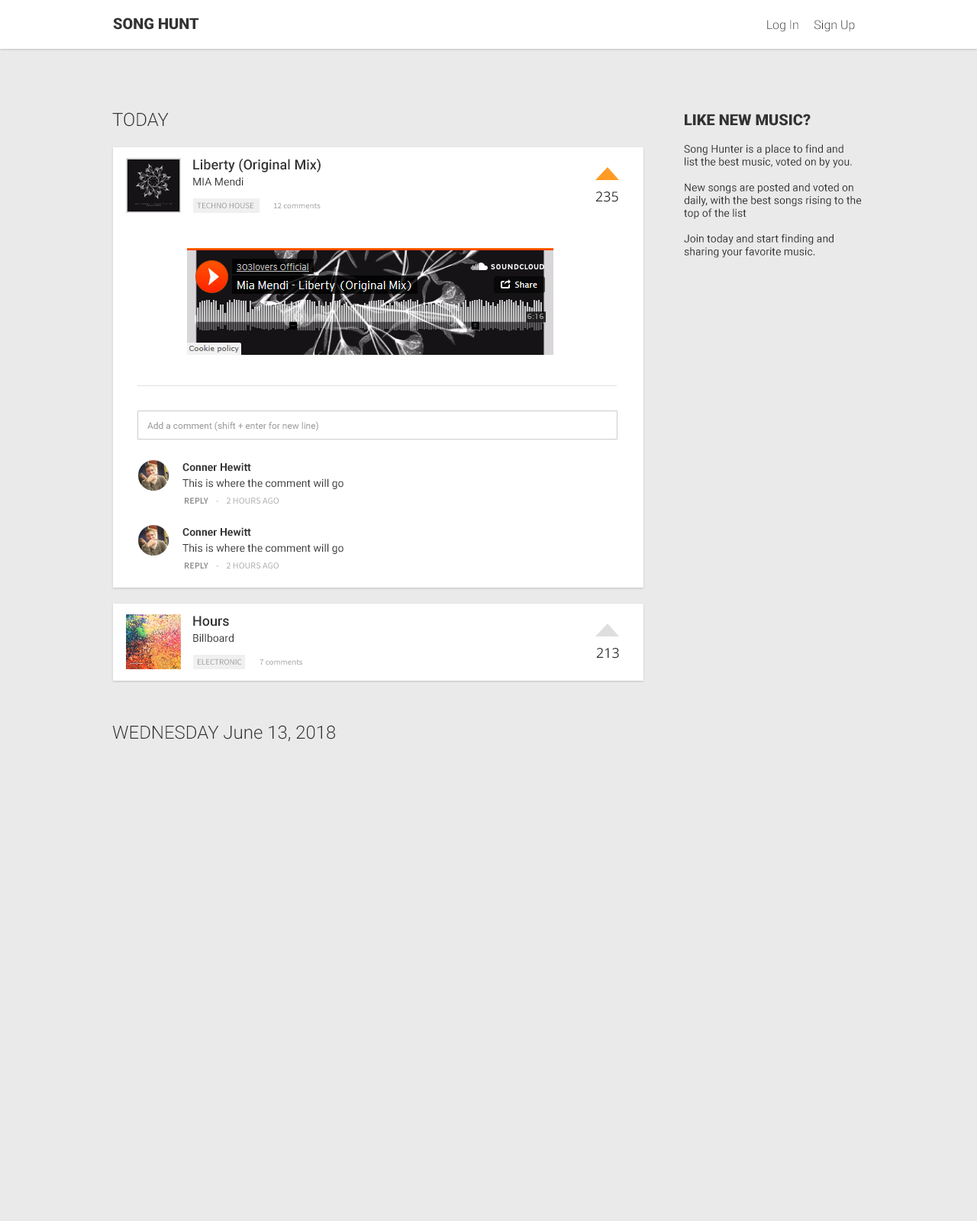
<style>
.page{position:relative;width:977px;height:1221px;background:#eaeaea}
.page>*{position:absolute;margin:0}
.t1{font:15.3px "Roboto-Black";color:#333333}
.t2{font:12.2px "Roboto-Light";color:#333333}
.t3{font:18.3px "Roboto-Light";color:#333333}
.t4{font:10.7px "Roboto-Regular";color:#333333}
.t5{font:13.7px "Roboto-Medium";color:#333333}
.t6{font:13.7px "OpenSans";color:#333333}
.t7{font:8.4px "SourceSansPro-Regular";color:#a0a0a0}
.t8{font:9.2px "Roboto-Regular";color:#979797}
.t9{font:10.7px "Roboto-Bold";color:#333333}
.t10{font:9.2px "SourceSansPro-Semibold";color:#909090}
.t11{font:9.2px "SourceSansPro-Regular";color:#ababab}
</style>
<div class="page">
<p class="t1" style="left:113px;top:18px;width:86px;height:12px">SONG HUNT</p>
<p class="t2" style="left:767px;top:20px;width:88px;height:12px">Log In     Sign Up</p>
<p class="t3" style="left:112px;top:112px;width:57px;height:15px">TODAY</p>
<p class="t1" style="left:684px;top:114px;width:126px;height:12px">LIKE NEW MUSIC?</p>
<p class="t4" style="left:684px;top:144px;width:177px;height:114px">Song Hunter is a place to find and<br>list the best music, voted on by you.<br><br>New songs are posted and voted on<br>daily, with the best songs rising to the<br>top of the list<br><br>Join today and start finding and<br>sharing your favorite music.</p>
<p class="t5" style="left:193px;top:158px;width:127px;height:14px">Liberty (Original Mix)</p>
<p class="t4" style="left:193px;top:177px;width:50px;height:9px">MIA Mendi</p>
<p class="t6" style="left:595px;top:192px;width:23px;height:10px">235</p>
<p class="t7" style="left:197px;top:202px;width:57px;height:6px">TECHNO HOUSE</p>
<p class="t7" style="left:273px;top:203px;width:47px;height:5px">12 comments</p>
<p class="t8" style="left:147px;top:421px;width:171px;height:10px">Add a comment (shift + enter for new line)</p>
<p class="t9" style="left:182px;top:462px;width:69px;height:10px">Conner Hewitt</p>
<p class="t4" style="left:182px;top:478px;width:161px;height:11px">This is where the comment will go</p>
<p class="t10" style="left:185px;top:498px;width:23px;height:6px">REPLY</p>
<p class="t11" style="left:216px;top:498px;width:63px;height:6px">-    2 HOURS AGO</p>
<p class="t9" style="left:182px;top:527px;width:69px;height:9px">Conner Hewitt</p>
<p class="t4" style="left:182px;top:543px;width:161px;height:11px">This is where the comment will go</p>
<p class="t10" style="left:185px;top:562px;width:23px;height:6px">REPLY</p>
<p class="t11" style="left:216px;top:562px;width:63px;height:6px">-    2 HOURS AGO</p>
<p class="t5" style="left:193px;top:616px;width:36px;height:10px">Hours</p>
<p class="t4" style="left:193px;top:633px;width:40px;height:9px">Billboard</p>
<p class="t6" style="left:596px;top:648px;width:23px;height:11px">213</p>
<p class="t7" style="left:198px;top:659px;width:44px;height:6px">ELECTRONIC</p>
<p class="t7" style="left:259px;top:659px;width:43px;height:6px">7 comments</p>
<p class="t3" style="left:112px;top:725px;width:223px;height:17px">WEDNESDAY June 13, 2018</p>
</div>
